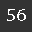
<style>
.page{position:relative;width:32px;height:32px;background:#333333}
.page>*{position:absolute;margin:0}
.t1{font:17.8px "MyriadPro-Regular";color:#ffffff;scale:1.12 1}
</style>
<div class="page">
<p class="t1" style="left:7px;top:9px;width:19px;height:12px">56</p>
</div>
